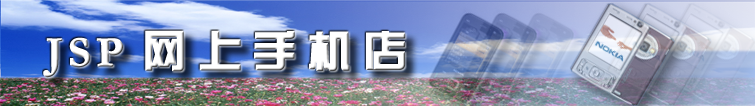
<style>
.page{position:relative;width:755px;height:106px}
.page>*{position:absolute;margin:0}
.t1{font:43.4px "BDZYJT--GB1-0";letter-spacing:0.22em;color:#ffffff;font-weight:bold}
.t2{font:43.4px "Garamond-Bold";letter-spacing:0.1em;color:#ffffff;font-weight:bold}
</style>
<div class="page">
<p class="t1" style="left:43px;top:30px;width:363px;height:48px"><span class="t2">JSP </span>网上手机店</p>
</div>
